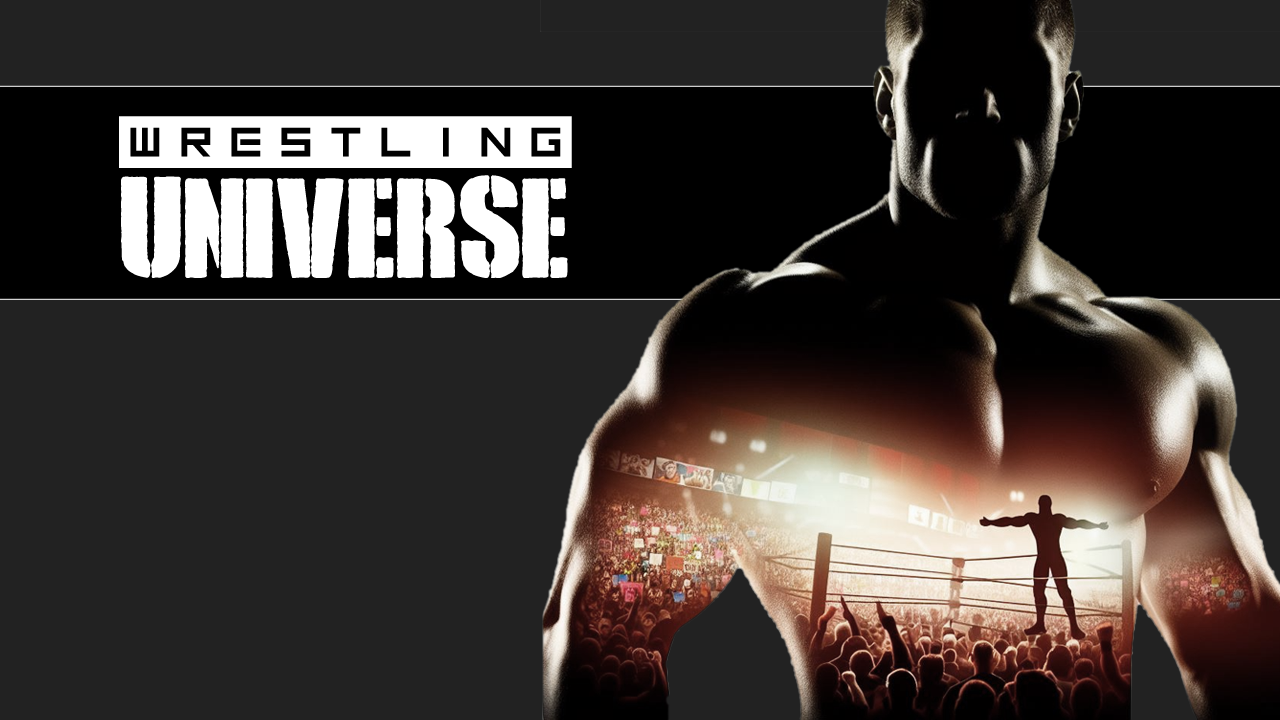
<style>
.page{position:relative;width:1280px;height:720px;background:#222222}
.page>*{position:absolute;margin:0}
.t1{font:92px "Inversionz";letter-spacing:-0.08em;color:#ffffff}
.t2{font:179.8px "RoyalRumble";color:#ffffff;text-transform:uppercase}
</style>
<div class="page">
<p class="t1" style="left:119px;top:116px;width:453px;height:52px">wrestling</p>
<p class="t2" style="left:121px;top:175px;width:447px;height:103px">Universe</p>
</div>
